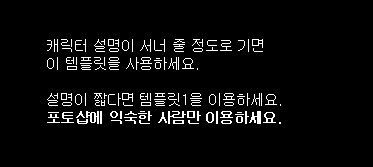
<style>
.page{position:relative;width:373px;height:167px;background:#000000}
.page>*{position:absolute;margin:0}
.t1{font:14px/18px "Gulim";color:#ffffff}
.t2{font:14px/18px "Gulim";color:#ffffff;font-weight:bold}
</style>
<div class="page">
<p class="t1" style="left:47px;top:39px;width:234px;height:85px">캐릭터 설명이 서너 줄 정도로 기면<br>이 템플릿을 사용하세요.<br><br>설명이 짧다면 템플릿1을 이용하세요.<br><span class="t2">포토샵에 익숙한 사람만 이용하세요.</span></p>
</div>
